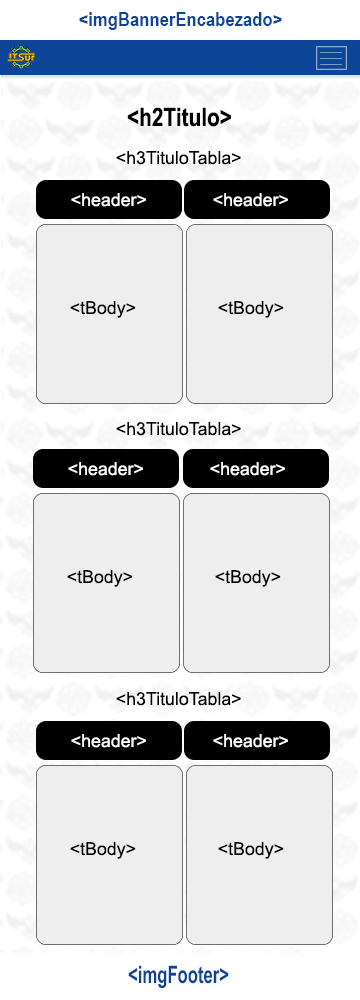
<style>
.page{position:relative;width:360px;height:1000px;background:#eeeeee}
.page>*{position:absolute;margin:0}
.t1{font:20.3px "ArialNarrow-Bold";color:#0d4598}
.t2{font:25.4px "ArialNarrow-Bold";color:#000000}
.t3{font:17.8px "ArialMT";color:#000000}
.t4{font:17.8px "ArialMT";color:#ffffff}
.t5{font:23.9px "ArialNarrow-Bold";color:#0d4598;scale:0.85 1}
</style>
<div class="page">
<p class="t1" style="left:79px;top:12px;width:203px;height:18px">&lt;imgBannerEncabezado&gt;</p>
<p class="t2" style="left:127px;top:107px;width:104px;height:20px">&lt;h2Titulo&gt;</p>
<p class="t3" style="left:116px;top:151px;width:125px;height:14px">&lt;h3TituloTabla&gt;</p>
<p class="t4" style="left:71px;top:193px;width:75px;height:14px">&lt;header&gt;</p>
<p class="t4" style="left:213px;top:193px;width:75px;height:14px">&lt;header&gt;</p>
<p class="t3" style="left:70px;top:301px;width:66px;height:17px">&lt;tBody&gt;</p>
<p class="t3" style="left:218px;top:301px;width:66px;height:17px">&lt;tBody&gt;</p>
<p class="t3" style="left:116px;top:422px;width:125px;height:14px">&lt;h3TituloTabla&gt;</p>
<p class="t4" style="left:68px;top:462px;width:75px;height:14px">&lt;header&gt;</p>
<p class="t4" style="left:210px;top:462px;width:75px;height:14px">&lt;header&gt;</p>
<p class="t3" style="left:67px;top:570px;width:66px;height:17px">&lt;tBody&gt;</p>
<p class="t3" style="left:215px;top:570px;width:66px;height:17px">&lt;tBody&gt;</p>
<p class="t3" style="left:116px;top:692px;width:125px;height:14px">&lt;h3TituloTabla&gt;</p>
<p class="t4" style="left:71px;top:734px;width:75px;height:14px">&lt;header&gt;</p>
<p class="t4" style="left:213px;top:734px;width:75px;height:14px">&lt;header&gt;</p>
<p class="t3" style="left:70px;top:842px;width:66px;height:17px">&lt;tBody&gt;</p>
<p class="t3" style="left:218px;top:842px;width:66px;height:17px">&lt;tBody&gt;</p>
<p class="t5" style="left:128px;top:965px;width:101px;height:23px">&lt;imgFooter&gt;</p>
</div>
